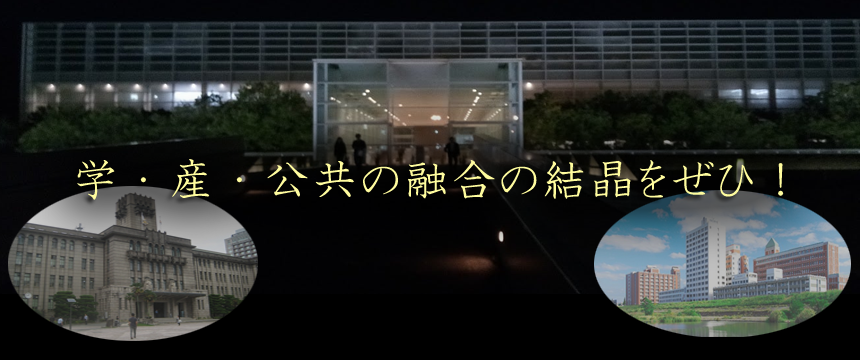
<style>
.page{position:relative;width:860px;height:360px}
.page>*{position:absolute;margin:0}
.t1{font:48px "HGPKyokashotai";color:#fffc9e}
</style>
<div class="page">
<p class="t1" style="left:77px;top:159px;width:707px;height:41px">学・産・公共の融合の結晶をぜひ！</p>
</div>
